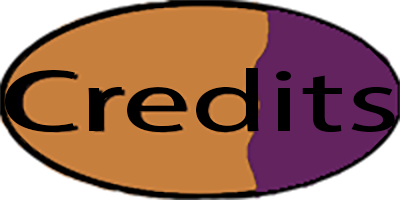
<style>
.page{position:relative;width:400px;height:200px;background:#c77f3e}
.page>*{position:absolute;margin:0}
.t1{font:89.3px "MyriadPro-Regular";color:#000000;scale:1.53 1}
</style>
<div class="page">
<p class="t1" style="left:5px;top:68px;width:390px;height:64px">Credits</p>
</div>
